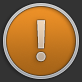
<style>
.page{position:relative;width:82px;height:82px;background:#333333}
.page>*{position:absolute;margin:0}
.t1{font:60px "MyriadPro-Semibold";letter-spacing:0.02em;color:#dec9b0}
</style>
<div class="page">
<p class="t1" style="left:36px;top:20px;width:10px;height:42px">!</p>
</div>
